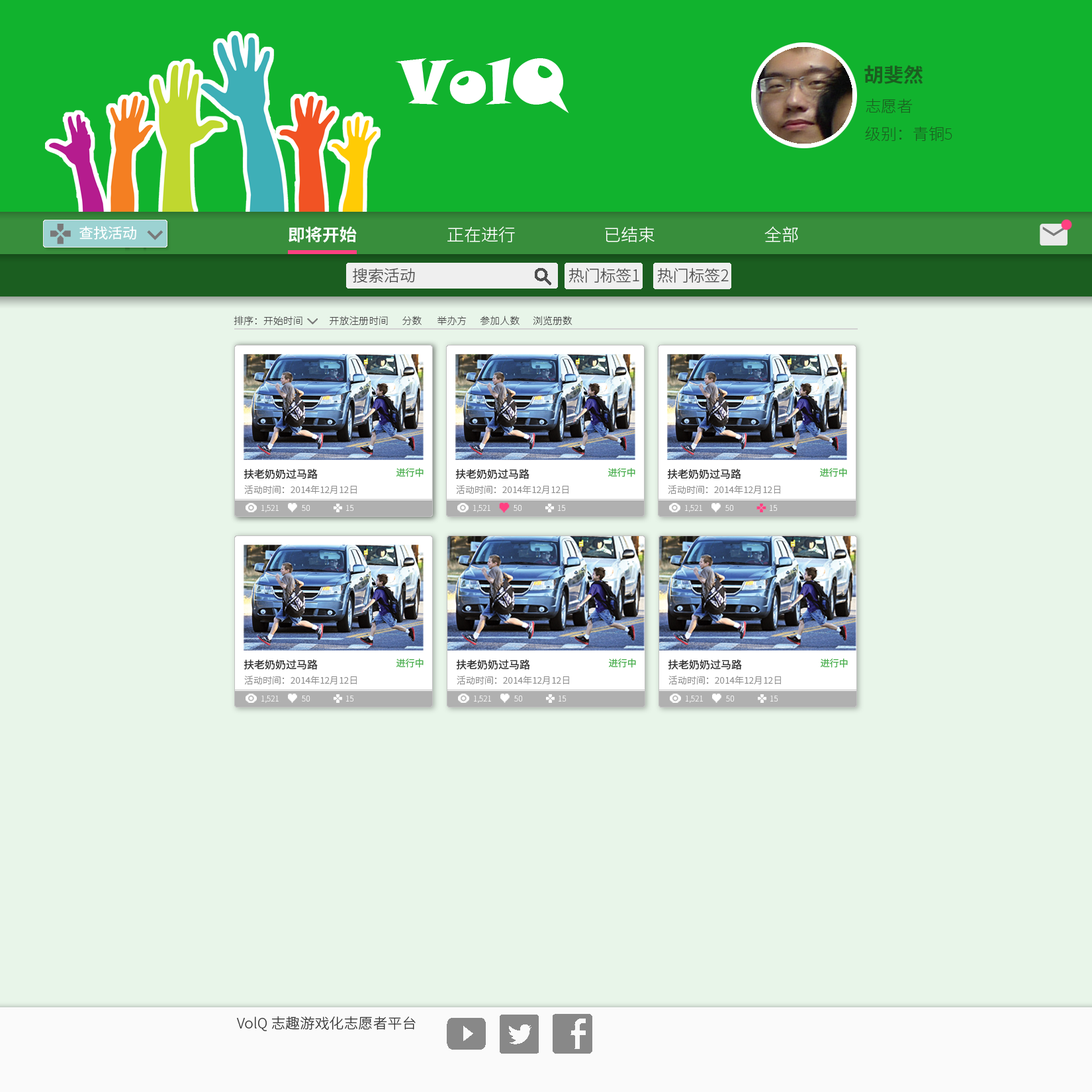
<style>
.page{position:relative;width:1092px;height:1092px;background:#e8f5e9}
.page>*{position:absolute;margin:0}
.t1{font:62.3px "SnapITC-Regular";color:#ffffff}
.t2{font:19.5px "NotoSansCJKsc-Bold";color:#1b5e20}
.t3{font:15.6px "NotoSansCJKsc-Thin";color:#1b5e20}
.t4{font:14.3px "NotoSansCJKsc-Regular";color:#ffffff}
.t5{font:16.9px "NotoSansCJKsc-Bold";color:#ffffff}
.t6{font:16.9px "NotoSansCJKsc-Light";color:#ffffff}
.t7{font:15.6px "NotoSansCJKsc-Light";color:#4e4e4e}
.t8{font:9.7px "NotoSansCJKsc-Thin";color:#484848}
.t9{font:14.3px "NotoSansCJKsc-Light";color:#353535}
</style>
<div class="page">
<p class="t1" style="left:395px;top:58px;width:174px;height:55px">VolQ</p>
<p class="t2" style="left:864px;top:65px;width:59px;height:19px">胡斐然</p>
<p class="t3" style="left:865px;top:99px;width:87px;height:42px">志愿者<br>级别：青铜5</p>
<p class="t4" style="left:79px;top:226px;width:57px;height:14px">查找活动</p>
<p class="t5" style="left:289px;top:226px;width:68px;height:17px">即将开始</p>
<p class="t6" style="left:447px;top:226px;width:68px;height:17px">正在进行</p>
<p class="t6" style="left:605px;top:226px;width:50px;height:16px">已结束</p>
<p class="t6" style="left:764px;top:226px;width:34px;height:17px">全部</p>
<p class="t7" style="left:568px;top:268px;width:71px;height:15px">热门标签1</p>
<p class="t7" style="left:657px;top:268px;width:72px;height:15px">热门标签2</p>
<p class="t8" style="left:234px;top:316px;width:338px;height:10px">排序：开始时间            开放注册时间      分数       举办方      参加人数      浏览册数</p>
<p class="t9" style="left:237px;top:1016px;width:179px;height:15px">VolQ 志趣游戏化志愿者平台</p>
</div>
